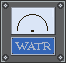
<style>
.page{position:relative;width:66px;height:63px;background:#5d5e5f}
.page>*{position:absolute;margin:0}
.t1{font:11.1px "Immortal";color:#acb7c9}
</style>
<div class="page">
<p class="t1" style="left:15px;top:42px;width:36px;height:8px">WATR</p>
</div>
